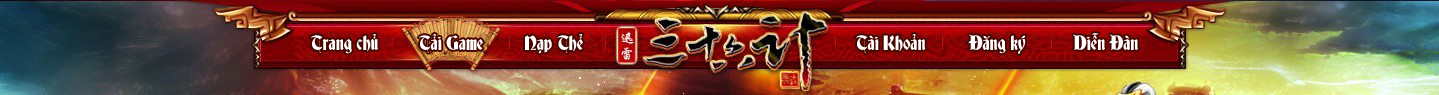
<style>
.page{position:relative;width:1439px;height:95px}
.page>*{position:absolute;margin:0}
.t1{font:18.7px "UTM-Deutsch-Gothic";color:#ffffff}
</style>
<div class="page">
<p class="t1" style="left:310px;top:34px;width:68px;height:20px">Trang chủ</p>
<p class="t1" style="left:418px;top:34px;width:65px;height:19px">Tải Game</p>
<p class="t1" style="left:524px;top:34px;width:59px;height:20px">Nạp Thẻ</p>
<p class="t1" style="left:855px;top:34px;width:71px;height:19px">Tài Khoản</p>
<p class="t1" style="left:968px;top:34px;width:58px;height:20px">Đăng ký</p>
<p class="t1" style="left:1073px;top:33px;width:65px;height:18px">Diễn Đàn</p>
</div>
